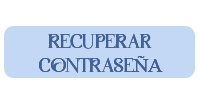
<style>
.page{position:relative;width:200px;height:100px;background:#ffffff}
.page>*{position:absolute;margin:0}
.t1{font:20px "Auralyess-Free-Trial";letter-spacing:-0.01em;color:#406196}
.t2{font:20px "TimesNewRomanPSMT";letter-spacing:-0.01em;color:#406196}
</style>
<div class="page">
<p class="t1" style="left:39px;top:33px;width:124px;height:40px;text-align:center">RECUPERAR<br>CONTRASE<span class="t2">ÑA</span></p>
<p class="t1" style="left:39px;top:33px;width:124px;height:40px;text-align:center">RECUPERAR<br>CONTRASE<span class="t2">ÑA</span></p>
<p class="t1" style="left:39px;top:33px;width:124px;height:40px;text-align:center">RECUPERAR<br>CONTRASE<span class="t2">ÑA</span></p>
</div>
